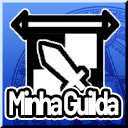
<style>
.page{position:relative;width:128px;height:128px;background:#000000}
.page>*{position:absolute;margin:0}
.t1{font:33.3px "Barlow-Bold";letter-spacing:-0.1em;color:#ffffff;scale:0.75 1}
</style>
<div class="page">
<p class="t1" style="left:9px;top:90px;width:110px;height:26px">Minha Guilda</p>
</div>
